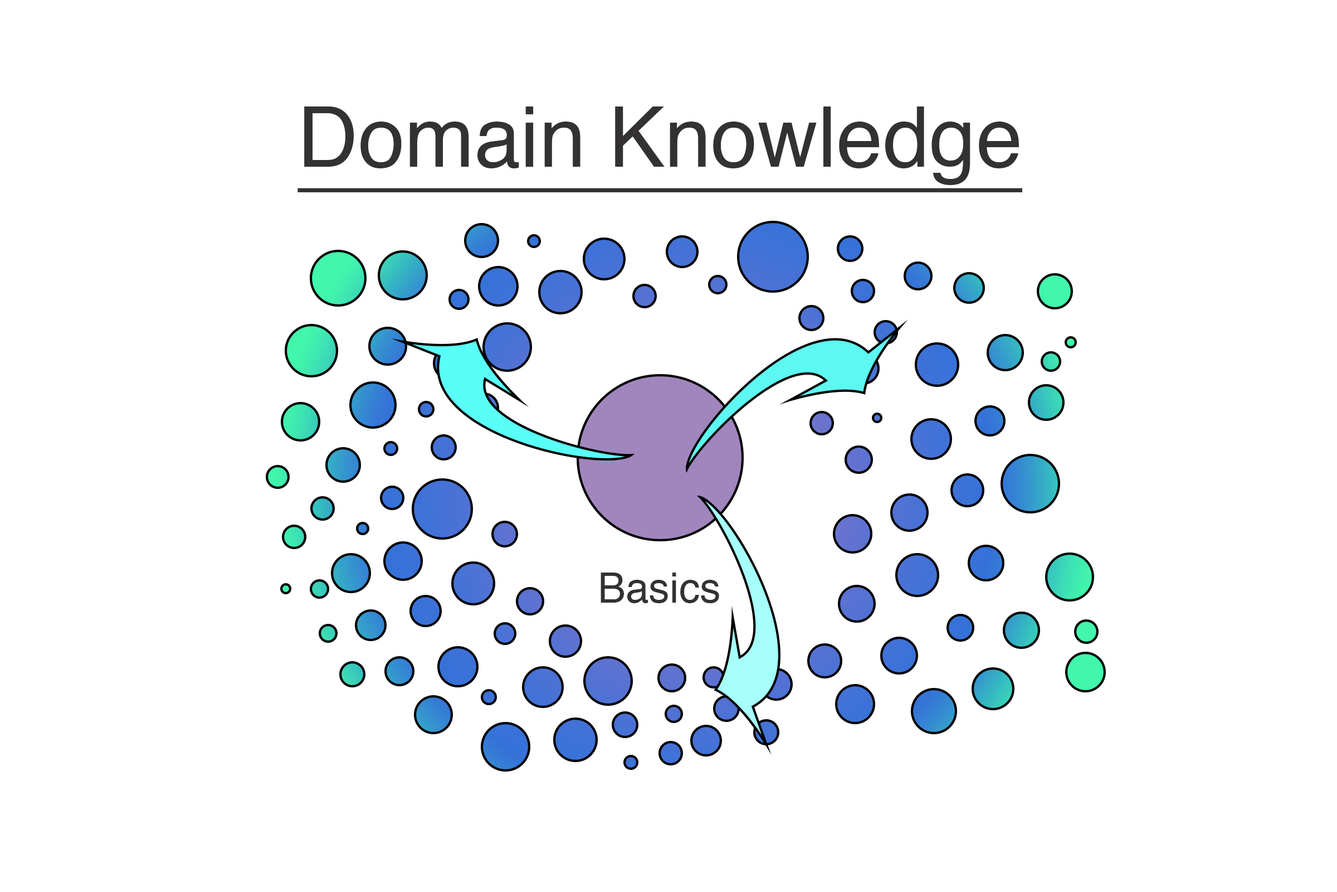
<style>
.page{position:relative;width:1337px;height:892px;background:#ffffff}
.page>*{position:absolute;margin:0}
.t1{font:83.6px "Helvetica";color:#333131;text-decoration:underline}
.t2{font:41.8px "Helvetica";color:#333131}
</style>
<div class="page">
<p class="t1" style="left:298px;top:106px;width:725px;height:86px">Domain Knowledge</p>
<p class="t2" style="left:601px;top:572px;width:118px;height:31px">Basics</p>
</div>
